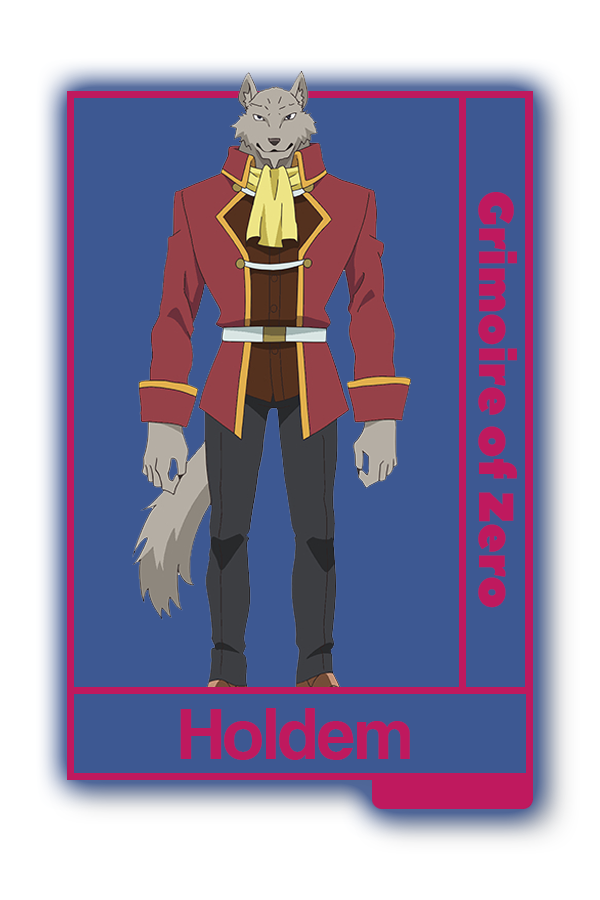
<style>
.page{position:relative;width:600px;height:900px;background:#3d5892}
.page>*{position:absolute;margin:0}
.t1{font:48.8px "PeaceSans";color:#bf195e}
.t2{font:75px "CoolveticaRg-Regular";color:#bf195e}
</style>
<div class="page">
<p class="t1" style="left:478px;top:192px;width:39px;height:416px;rotate:90deg">Grimoire of Zero</p>
<p class="t2" style="left:180px;top:708px;width:230px;height:52px">Holdem</p>
</div>
